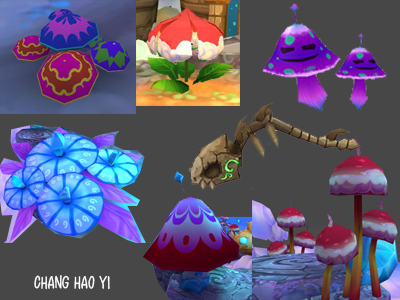
<style>
.page{position:relative;width:400px;height:300px;background:#474747}
.page>*{position:absolute;margin:0}
.t1{font:18.7px "tams_font_046";color:#ffffff;text-transform:uppercase}
</style>
<div class="page">
<p class="t1" style="left:34px;top:275px;width:76px;height:15px">chang hao yi</p>
</div>
